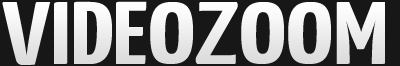
<style>
.page{position:relative;width:400px;height:66px;background:#171717}
.page>*{position:absolute;margin:0}
.t1{font:87.1px "YanoneKaffeesatz-Bold";color:#ffffff;text-transform:uppercase;scale:1.33 1}
</style>
<div class="page">
<p class="t1" style="left:2px;top:1px;width:383px;height:64px">videozoom</p>
</div>
